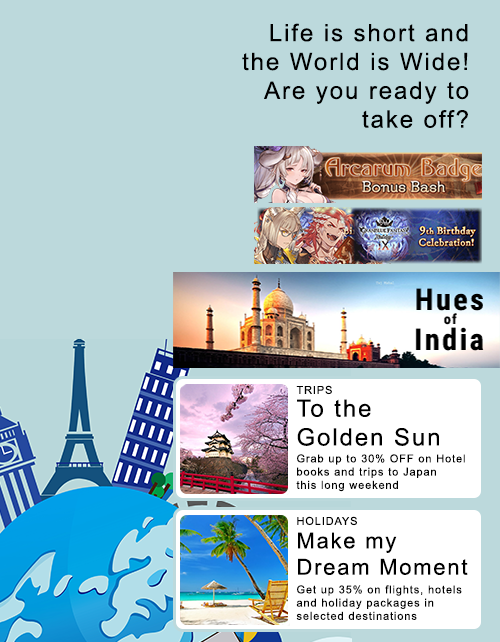
<style>
.page{position:relative;width:500px;height:642px;background:#bcd9dc}
.page>*{position:absolute;margin:0}
.t1{font:24px "ArialMT";letter-spacing:0.08em;color:#000000}
.t2{font:11px "ArialMT";letter-spacing:0.08em;color:#000000}
.t3{font:22px "ArialMT";letter-spacing:0.08em;color:#000000}
</style>
<div class="page">
<p class="t1" style="left:242px;top:23px;width:227px;height:105px">Life is short and the World is Wide!<br>Are you ready to take off?</p>
<p class="t2" style="left:296px;top:385px;width:36px;height:10px">TRIPS</p>
<p class="t1" style="left:297px;top:399px;width:142px;height:47px;text-align:right">To the <br>Golden Sun</p>
<p class="t2" style="left:296px;top:454px;width:169px;height:38px;text-align:right">Grab up to 30% OFF on Hotel <br>books and trips to Japan <br>this long weekend</p>
<p class="t2" style="left:297px;top:516px;width:60px;height:10px">HOLIDAYS</p>
<p class="t3" style="left:298px;top:532px;width:170px;height:43px;text-align:right">Make my Dream Moment</p>
<p class="t2" style="left:296px;top:585px;width:166px;height:35px;text-align:right">Get up 35% on flights, hotels and holiday packages in selected destinations</p>
</div>
